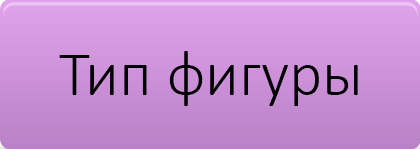
<style>
.page{position:relative;width:420px;height:149px}
.page>*{position:absolute;margin:0}
.t1{font:64px "Calibri-Light";color:#000000}
</style>
<div class="page">
<p class="t1" style="left:59px;top:51px;width:299px;height:55px">Тип фигуры</p>
</div>
